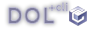
<style>
.page{position:relative;width:96px;height:32px;background:#ffffff}
.page>*{position:absolute;margin:0}
.t1{font:12px "ElyRounded-Heavy";color:#b4b2ca}
.t2{font:24px "ElyRounded-Heavy";letter-spacing:0.025em}
</style>
<div class="page">
<p class="t1" style="left:48px;top:2px;width:20px;height:10px">+cli</p>
<p class="t2" style="left:8px;top:7px;width:47px;height:17px">DOL</p>
</div>
